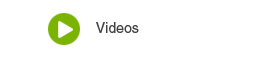
<style>
.page{position:relative;width:253px;height:57px;background:#ffffff}
.page>*{position:absolute;margin:0}
.t1{font:14px "Helvetica";color:#424242}
</style>
<div class="page">
<p class="t1" style="left:96px;top:22px;width:43px;height:11px">Videos</p>
</div>
